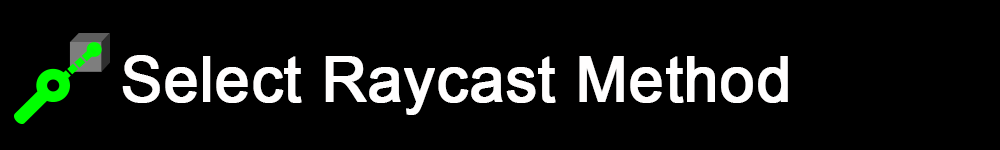
<style>
.page{position:relative;width:1000px;height:150px;background:#000000}
.page>*{position:absolute;margin:0}
.t1{font:62.5px "ArialMT";color:#fffefe;font-weight:bold}
</style>
<div class="page">
<p class="t1" style="left:122px;top:55px;width:666px;height:60px">Select Raycast Method</p>
</div>
